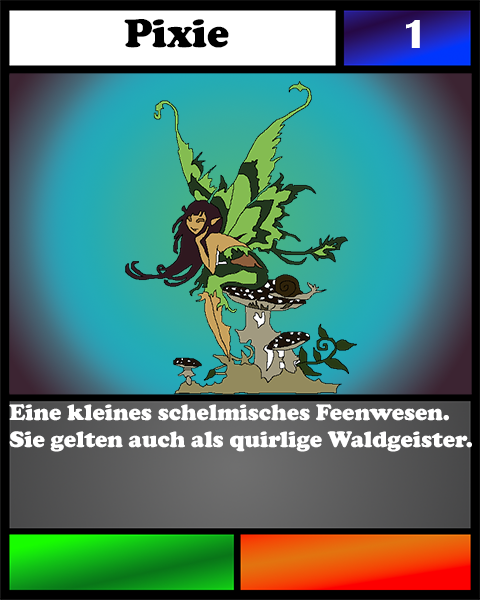
<style>
.page{position:relative;width:480px;height:600px}
.page>*{position:absolute;margin:0}
.t1{font:41.7px "CooperBlack";color:#000000}
.t2{font:41.7px "BritannicBold";color:#ffffff}
.t3{font:23.1px "CooperBlack";color:#ffffff}
</style>
<div class="page">
<p class="t1" style="left:124px;top:19px;width:105px;height:29px">Pixie</p>
<p class="t2" style="left:406px;top:20px;width:14px;height:28px">1</p>
<p class="t3" style="left:9px;top:404px;width:463px;height:48px">Eine kleines schelmisches Feenwesen. <br>Sie gelten auch als quirlige Waldgeister.</p>
</div>
